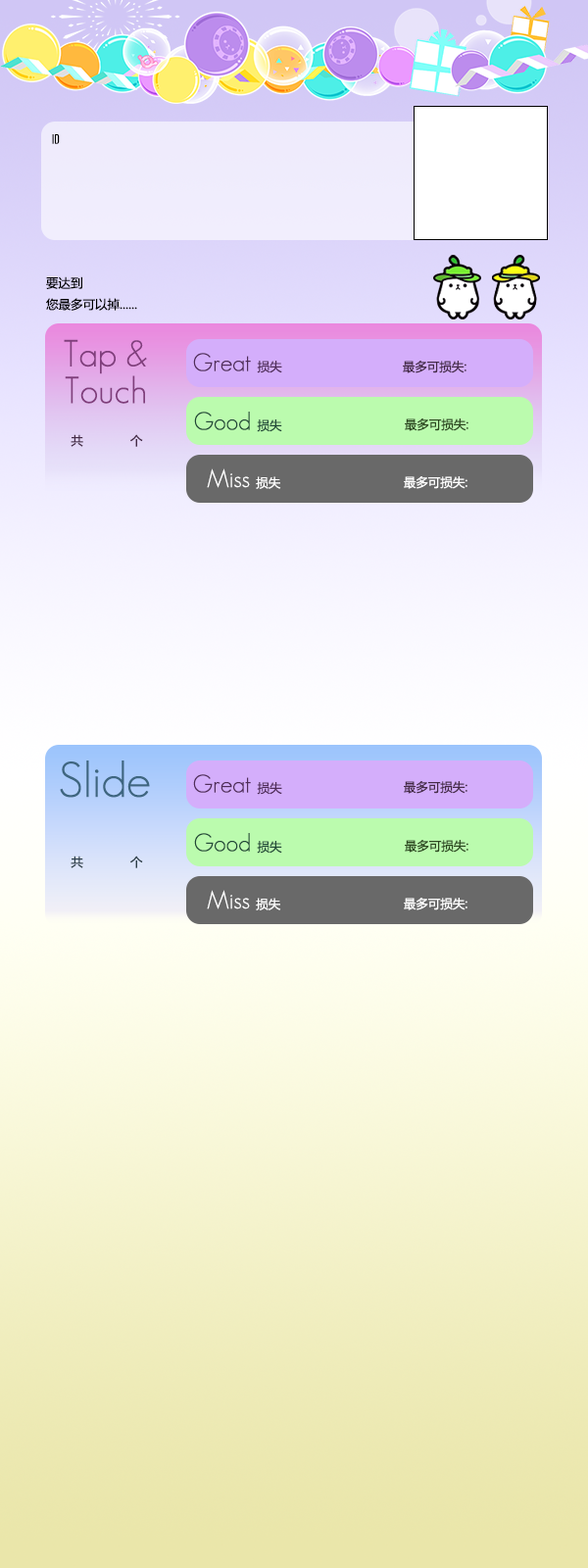
<style>
.page{position:relative;width:588px;height:1568px}
.page>*{position:absolute;margin:0}
.t1{font:12.2px "AgencyFB-Reg";color:#000000}
.t2{font:12.2px "MicrosoftYaHei";color:#000000}
.t3{font:36.8px/36.8px "Andrea-Light";color:#803e7c}
.t4{font:24.5px "Andrea-Light";color:#502d59}
.t5{font:12.3px "MicrosoftYaHei";color:#502d59}
.t6{font:12.2px "MicrosoftYaHei";color:#452b47}
.t7{font:24.5px "Andrea-Light";color:#214838}
.t8{font:12.3px "MicrosoftYaHei";color:#214838}
.t9{font:12.2px "MicrosoftYaHei";color:#2d4820}
.t10{font:24.5px "Andrea-Light";color:#ffffff}
.t11{font:12.3px "MicrosoftYaHei";color:#ffffff}
.t12{font:12.2px "MicrosoftYaHei";color:#ffffff}
.t13{font:49px "Andrea-Light";color:#3e6680}
.t14{font:12.2px "MicrosoftYaHei";color:#2b3d47}
</style>
<div class="page">
<p class="t1" style="left:52px;top:134px;width:8px;height:10px">ID</p>
<p class="t2" style="left:46px;top:276px;width:91px;height:35px">要达到                  <br>您最多可以掉......</p>
<p class="t3" style="left:64px;top:339px;width:83px;height:65px;text-align:center">Tap &amp;<br>Touch</p>
<p class="t4" style="left:193px;top:353px;width:89px;height:20px">Great <span class="t5">损失</span></p>
<p class="t6" style="left:403px;top:361px;width:63px;height:12px">最多可损失:</p>
<p class="t7" style="left:194px;top:412px;width:88px;height:20px">Good <span class="t8">损失</span></p>
<p class="t9" style="left:405px;top:418px;width:63px;height:13px">最多可损失:</p>
<p class="t6" style="left:71px;top:434px;width:72px;height:13px">共             个</p>
<p class="t10" style="left:207px;top:468px;width:74px;height:21px">Miss <span class="t11">损失</span></p>
<p class="t12" style="left:404px;top:476px;width:63px;height:13px">最多可损失:</p>
<p class="t13" style="left:60px;top:760px;width:90px;height:38px">Slide</p>
<p class="t4" style="left:193px;top:774px;width:89px;height:21px">Great <span class="t5">损失</span></p>
<p class="t6" style="left:404px;top:781px;width:63px;height:13px">最多可损失:</p>
<p class="t7" style="left:194px;top:833px;width:88px;height:21px">Good <span class="t8">损失</span></p>
<p class="t9" style="left:405px;top:840px;width:63px;height:13px">最多可损失:</p>
<p class="t14" style="left:71px;top:856px;width:72px;height:12px">共             个</p>
<p class="t10" style="left:207px;top:890px;width:74px;height:20px">Miss <span class="t11">损失</span></p>
<p class="t12" style="left:404px;top:898px;width:63px;height:12px">最多可损失:</p>
</div>
